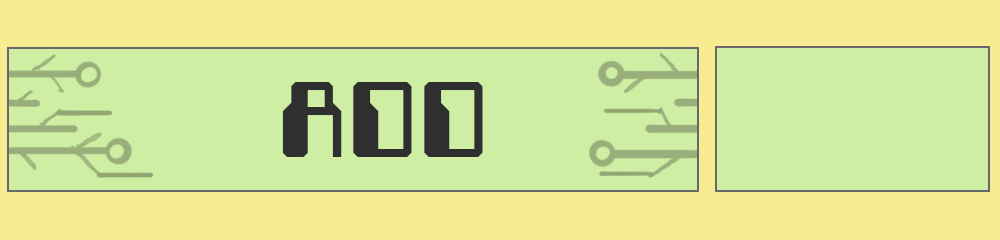
<style>
.page{position:relative;width:1000px;height:240px;background:#ceefa3}
.page>*{position:absolute;margin:0}
.t1{font:125px "Computerfont";color:#302f30}
</style>
<div class="page">
<p class="t1" style="left:282px;top:82px;width:201px;height:75px">ADD</p>
</div>
